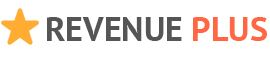
<style>
.page{position:relative;width:270px;height:60px;background:#ffffff}
.page>*{position:absolute;margin:0}
.t1{font:34px "PTSans-Bold";color:#555555}
.t2{font:34px "PTSans-Bold";color:#ff6644}
</style>
<div class="page">
<p class="t1" style="left:47px;top:17px;width:220px;height:24px">REVENUE <span class="t2">PLUS</span></p>
</div>
